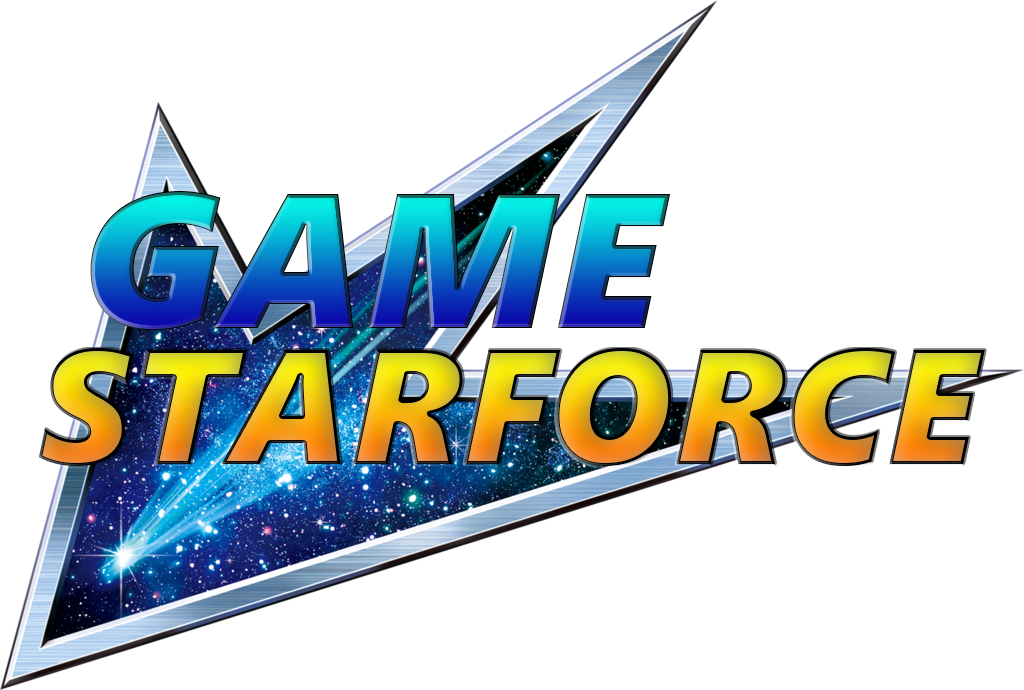
<style>
.page{position:relative;width:1024px;height:690px;background:#ffffff}
.page>*{position:absolute;margin:0}
.t1{font:191.7px "SegoeUIBlack-Italic"}
.t2{font:162.5px "SegoeUIBlack-Italic"}
</style>
<div class="page">
<p class="t1" style="left:90px;top:191px;width:581px;height:139px">GAME</p>
<p class="t2" style="left:38px;top:348px;width:947px;height:118px">STARFORCE</p>
</div>
